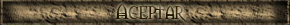
<style>
.page{position:relative;width:290px;height:25px}
.page>*{position:absolute;margin:0}
.t1{font:20px "Morpheus"}
</style>
<div class="page">
<p class="t1" style="left:115px;top:4px;width:74px;height:18px">Aceptar</p>
</div>
